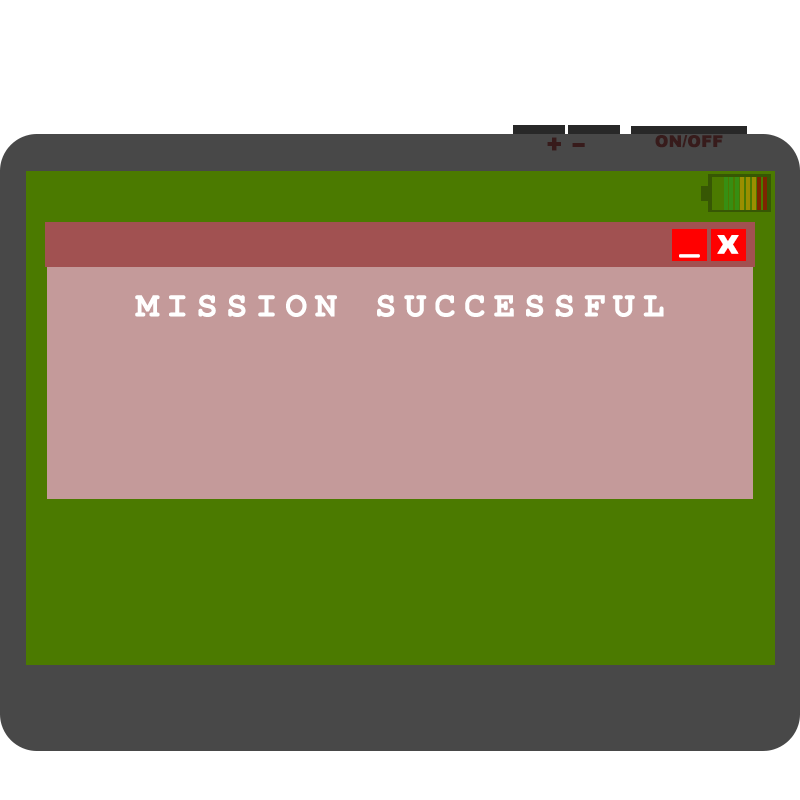
<style>
.page{position:relative;width:800px;height:800px;background:#4b7a00}
.page>*{position:absolute;margin:0}
.t1{font:24px "Arial-Black";color:#371b1b;font-weight:bold}
.t2{font:16px "Arial-Black";color:#371b1b;font-weight:bold}
.t3{font:24px "Arial-Black";color:#371b1b;font-weight:bold;scale:1.72 1}
.t4{font:30px "NissanOpti";letter-spacing:0.2em;color:#ffffff;font-weight:bold}
.t5{font:30px "CourierNewPS-BoldMT";letter-spacing:0.2em;color:#ffffff;font-weight:bold}
.t6{font:36px "CourierNewPS-BoldMT";letter-spacing:0.2em;color:#ffffff;font-weight:bold}
</style>
<div class="page">
<p class="t1" style="left:547px;top:137px;width:14px;height:14px">+</p>
<p class="t2" style="left:655px;top:135px;width:68px;height:13px">ON/OFF</p>
<p class="t3" style="left:572px;top:143px;width:13px;height:4px">-</p>
<p class="t4" style="left:717px;top:235px;width:22px;height:19px">x</p>
<p class="t5" style="left:679px;top:254px;width:21px;height:4px">_</p>
<p class="t6" style="left:135px;top:294px;width:529px;height:23px">MISSION SUCCESSFUL</p>
</div>
